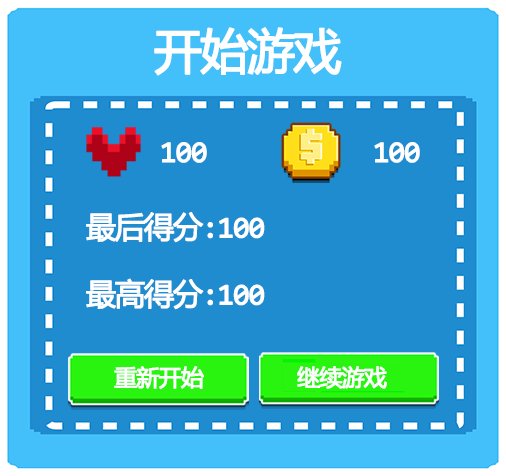
<style>
.page{position:relative;width:506px;height:476px;background:#1f8cd0}
.page>*{position:absolute;margin:0}
.t1{font:48px "YaHei-Consolas-Hybrid";letter-spacing:-0.06em;color:#ffffff;font-weight:bold}
.t2{font:30px "YaHei-Consolas-Hybrid";letter-spacing:-0.06em;color:#ffffff;font-weight:bold}
.t3{font:22.8px "YaHei-Consolas-Hybrid";letter-spacing:-0.06em;color:#ffffff;font-weight:bold}
</style>
<div class="page">
<p class="t1" style="left:154px;top:27px;width:188px;height:49px">开始游戏</p>
<p class="t2" style="left:161px;top:142px;width:46px;height:21px">100</p>
<p class="t2" style="left:374px;top:142px;width:46px;height:21px">100</p>
<p class="t2" style="left:86px;top:212px;width:179px;height:31px">最后得分:100</p>
<p class="t2" style="left:86px;top:278px;width:179px;height:32px">最高得分:100</p>
<p class="t3" style="left:114px;top:366px;width:90px;height:24px">重新开始</p>
<p class="t3" style="left:297px;top:365px;width:90px;height:24px">继续游戏</p>
</div>
